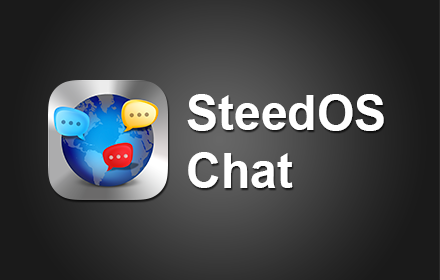
<style>
.page{position:relative;width:440px;height:280px}
.page>*{position:absolute;margin:0}
.t1{font:48px "Arial-BoldMT";color:#ffffff}
</style>
<div class="page">
<p class="t1" style="left:187px;top:94px;width:197px;height:94px">SteedOS<br>Chat</p>
</div>
